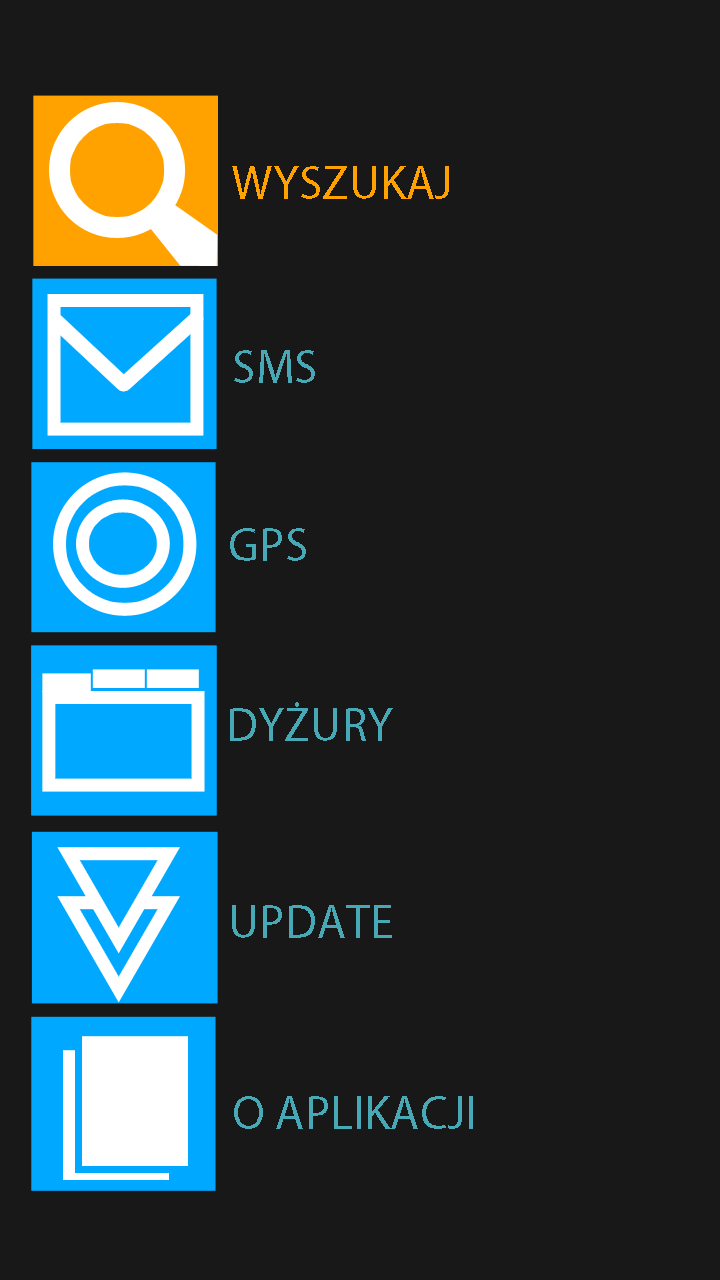
<style>
.page{position:relative;width:720px;height:1280px;background:#181818}
.page>*{position:absolute;margin:0}
.t1{font:48px "MyriadPro-Regular";color:#ffa200}
.t2{font:48px "MyriadPro-Regular";color:#46a9b5}
</style>
<div class="page">
<p class="t1" style="left:232px;top:166px;width:217px;height:33px">WYSZUKAJ</p>
<p class="t2" style="left:234px;top:350px;width:81px;height:33px">SMS</p>
<p class="t2" style="left:230px;top:528px;width:76px;height:33px">GPS</p>
<p class="t2" style="left:230px;top:702px;width:163px;height:39px">DYŻURY</p>
<p class="t2" style="left:230px;top:702px;width:163px;height:39px">DYŻURY</p>
<p class="t2" style="left:232px;top:905px;width:160px;height:33px">UPDATE</p>
<p class="t2" style="left:234px;top:1096px;width:239px;height:33px">O APLIKACJI</p>
</div>
